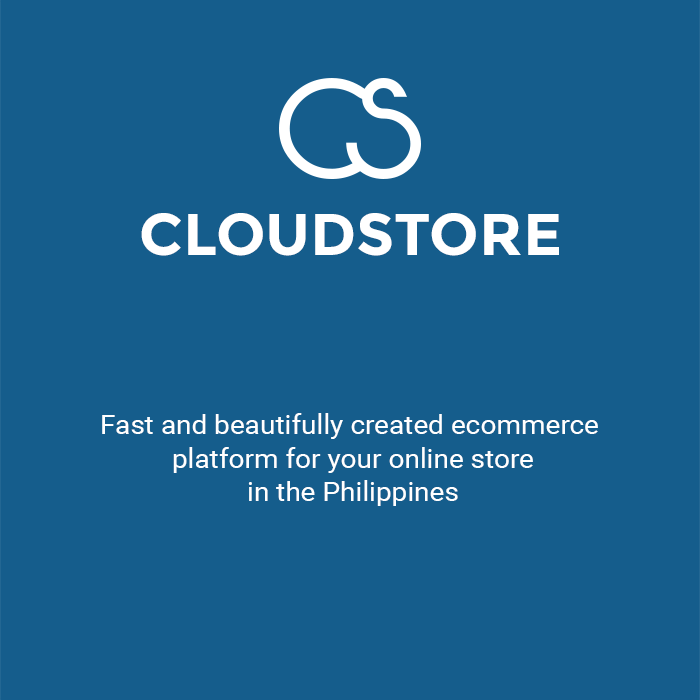
<style>
.page{position:relative;width:700px;height:700px;background:#155d8c}
.page>*{position:absolute;margin:0}
.t1{font:58.8px "Montserrat-Bold";color:#ffffff}
.t2{font:27.4px "Roboto-Regular";color:#ffffff}
</style>
<div class="page">
<p class="t1" style="left:141px;top:213px;width:418px;height:43px">CLOUDSTORE</p>
<p class="t2" style="left:102px;top:413px;width:496px;height:93px;text-align:center">Fast and beautifully created ecommerce <br>platform for your online store<br>in the Philippines</p>
</div>
